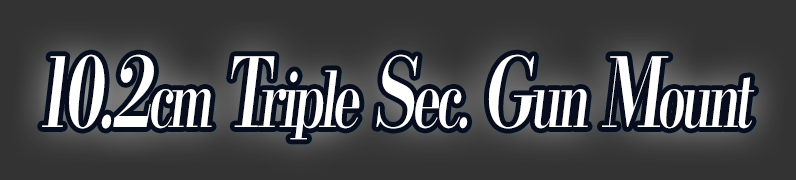
<style>
.page{position:relative;width:796px;height:180px;background:#333333}
.page>*{position:absolute;margin:0}
.t1{font:76.8px "KochoStd-Heavy";letter-spacing:-0.08em;color:#ffffff;font-style:italic;scale:0.67 1}
.t2{font:96px "KochoStd-Heavy";letter-spacing:-0.08em;color:#ffffff;font-style:italic;scale:0.67 1}
</style>
<div class="page">
<p class="t1" style="left:42px;top:54px;width:713px;height:86px"><span class="t2">10.2</span>cm<span class="t2"> T</span>riple<span class="t2"> S</span>ec.<span class="t2"> G</span>un<span class="t2"> M</span>ount</p>
</div>
